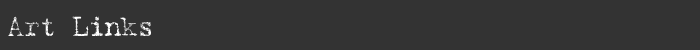
<style>
.page{position:relative;width:700px;height:50px;background:#333333}
.page>*{position:absolute;margin:0}
.t1{font:28px "Harting-Plain";letter-spacing:-0.025em;color:#ffffff}
</style>
<div class="page">
<p class="t1" style="left:8px;top:16px;width:143px;height:20px">Art Links</p>
</div>
